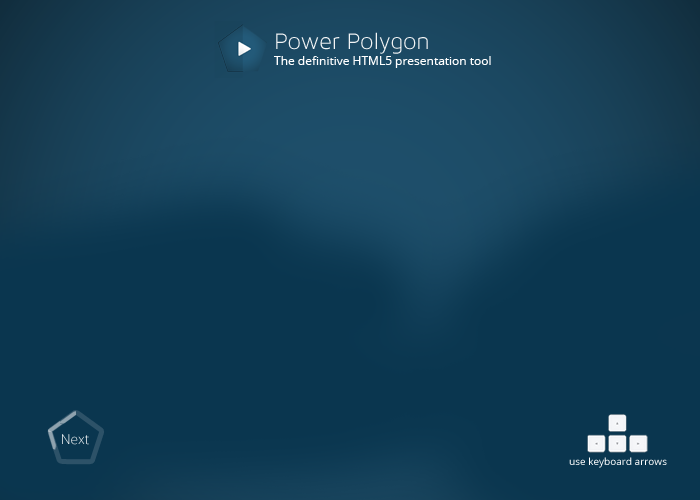
<style>
.page{position:relative;width:700px;height:500px;background:#0a364f}
.page>*{position:absolute;margin:0}
.t1{font:24px "MavenProLight300-Regular";color:#ffffff}
.t2{font:12px "OpenSans";color:#ffffff}
.t3{font:13.6px "OpenSans-Light"}
.t4{font:10px "OpenSans";color:#ffffff}
</style>
<div class="page">
<p class="t1" style="left:276px;top:32px;width:152px;height:22px">Power Polygon</p>
<p class="t2" style="left:274px;top:56px;width:217px;height:12px">The definitive HTML5 presentation tool</p>
<p class="t3" style="left:62px;top:434px;width:27px;height:11px">Next</p>
<p class="t4" style="left:569px;top:457px;width:98px;height:11px">use keyboard arrows</p>
</div>
